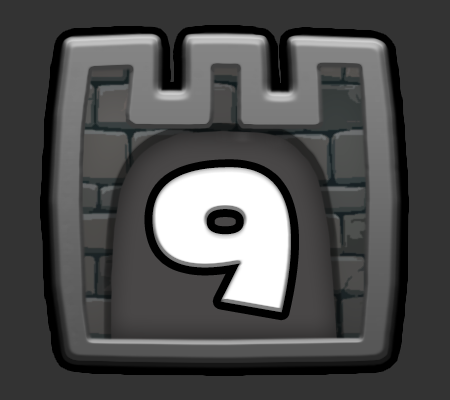
<style>
.page{position:relative;width:450px;height:400px;background:#333333}
.page>*{position:absolute;margin:0}
.t1{font:217px "Funhouse";color:#ffffff}
</style>
<div class="page">
<p class="t1" style="left:152px;top:167px;width:139px;height:146px">9</p>
</div>
